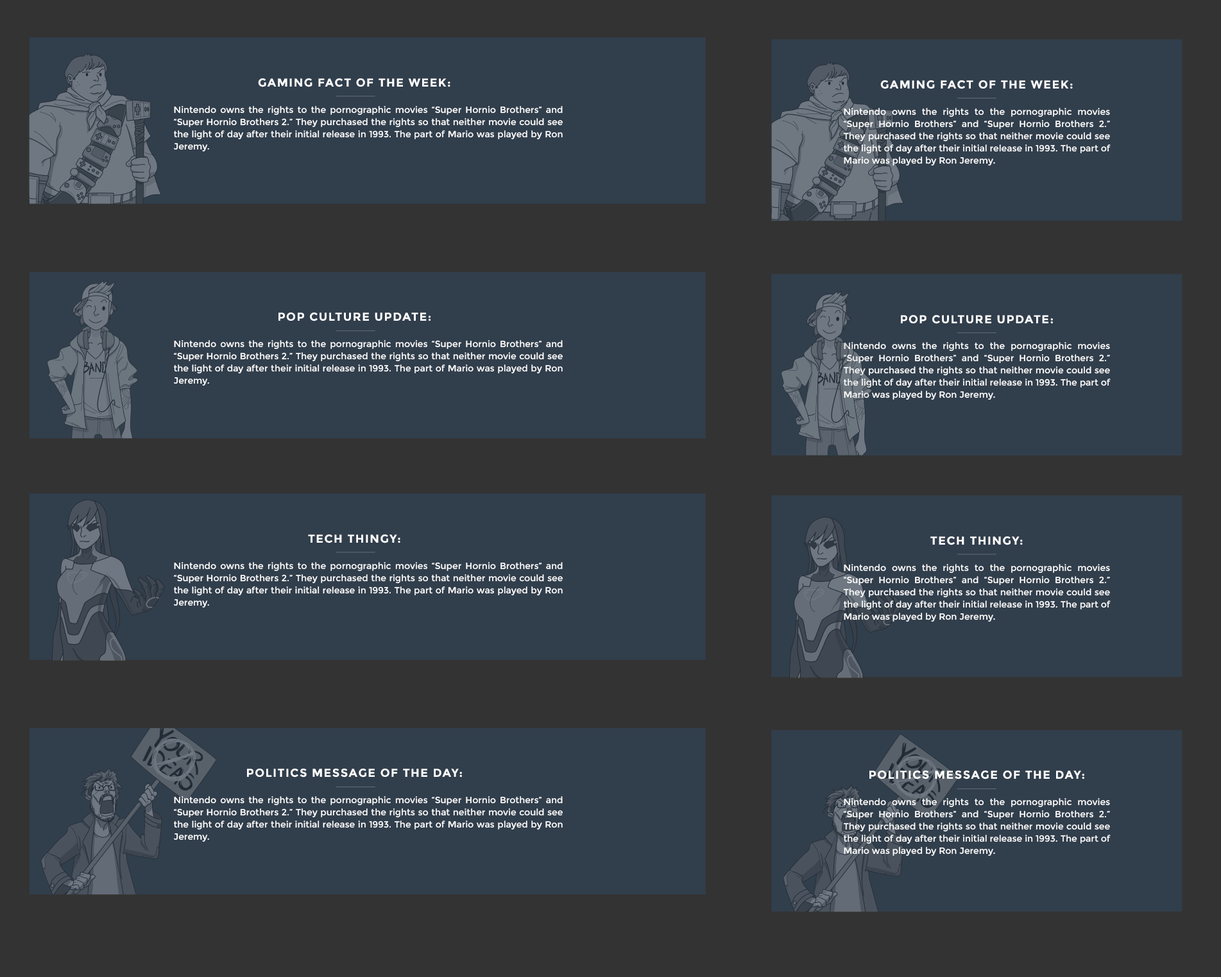
<style>
.page{position:relative;width:1221px;height:977px;background:#313e4c}
.page>*{position:absolute;margin:0}
.t1{font:11.5px "Montserrat-Bold";letter-spacing:0.08em;color:#ffffff;text-transform:uppercase}
.t2{font:9px/12.2px "Montserrat-Regular";color:#ffffff}
</style>
<div class="page">
<p class="t1" style="left:258px;top:78px;width:192px;height:9px">Gaming Fact Of The Week:</p>
<p class="t1" style="left:880px;top:80px;width:192px;height:9px">Gaming Fact Of The Week:</p>
<p class="t2" style="left:174px;top:106px;width:389px;height:46px;text-align:justify">Nintendo owns the rights to the pornographic movies “Super Hornio Brothers” and “Super Hornio Brothers 2.” They purchased the rights so that neither movie could see the light of day after their initial release in 1993. The part of Mario was played by Ron Jeremy.</p>
<p class="t2" style="left:843px;top:108px;width:267px;height:58px;text-align:justify">Nintendo owns the rights to the pornographic movies “Super Hornio Brothers” and “Super Hornio Brothers 2.” They purchased the rights so that neither movie could see the light of day after their initial release in 1993. The part of Mario was played by Ron Jeremy.</p>
<p class="t1" style="left:278px;top:312px;width:153px;height:9px">Pop Culture Update:</p>
<p class="t1" style="left:901px;top:315px;width:152px;height:9px">Pop Culture Update:</p>
<p class="t2" style="left:174px;top:340px;width:389px;height:46px;text-align:justify">Nintendo owns the rights to the pornographic movies “Super Hornio Brothers” and “Super Hornio Brothers 2.” They purchased the rights so that neither movie could see the light of day after their initial release in 1993. The part of Mario was played by Ron Jeremy.</p>
<p class="t2" style="left:843px;top:342px;width:267px;height:58px;text-align:justify">Nintendo owns the rights to the pornographic movies “Super Hornio Brothers” and “Super Hornio Brothers 2.” They purchased the rights so that neither movie could see the light of day after their initial release in 1993. The part of Mario was played by Ron Jeremy.</p>
<p class="t1" style="left:308px;top:534px;width:92px;height:9px">Tech Thingy:</p>
<p class="t1" style="left:930px;top:536px;width:92px;height:9px">Tech Thingy:</p>
<p class="t2" style="left:174px;top:562px;width:389px;height:46px;text-align:justify">Nintendo owns the rights to the pornographic movies “Super Hornio Brothers” and “Super Hornio Brothers 2.” They purchased the rights so that neither movie could see the light of day after their initial release in 1993. The part of Mario was played by Ron Jeremy.</p>
<p class="t2" style="left:843px;top:564px;width:267px;height:58px;text-align:justify">Nintendo owns the rights to the pornographic movies “Super Hornio Brothers” and “Super Hornio Brothers 2.” They purchased the rights so that neither movie could see the light of day after their initial release in 1993. The part of Mario was played by Ron Jeremy.</p>
<p class="t1" style="left:247px;top:768px;width:215px;height:9px">Politics Message Of The Day:</p>
<p class="t1" style="left:869px;top:770px;width:215px;height:9px">Politics Message Of The Day:</p>
<p class="t2" style="left:174px;top:796px;width:389px;height:46px;text-align:justify">Nintendo owns the rights to the pornographic movies “Super Hornio Brothers” and “Super Hornio Brothers 2.” They purchased the rights so that neither movie could see the light of day after their initial release in 1993. The part of Mario was played by Ron Jeremy.</p>
<p class="t2" style="left:843px;top:798px;width:267px;height:58px;text-align:justify">Nintendo owns the rights to the pornographic movies “Super Hornio Brothers” and “Super Hornio Brothers 2.” They purchased the rights so that neither movie could see the light of day after their initial release in 1993. The part of Mario was played by Ron Jeremy.</p>
</div>
